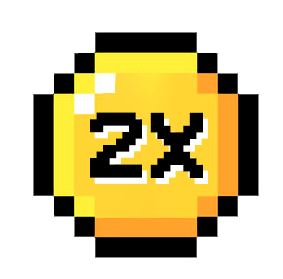
<style>
.page{position:relative;width:283px;height:279px;background:#ffffff}
.page>*{position:absolute;margin:0}
.t1{font:130px "Pixeboy";color:#000000}
</style>
<div class="page">
<p class="t1" style="left:90px;top:112px;width:113px;height:66px">2x</p>
</div>
